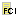
<style>
.page{position:relative;width:16px;height:16px;background:#ffffff}
.page>*{position:absolute;margin:0}
.t1{font:9px "CenturyGothic-Bold";color:#000000}
</style>
<div class="page">
<p class="t1" style="left:4px;top:8px;width:12px;height:6px">FCI</p>
</div>
